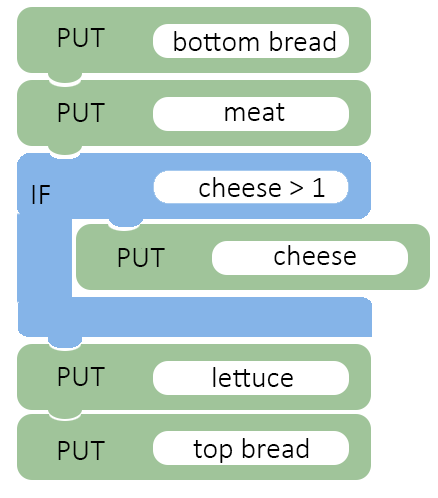
<style>
.page{position:relative;width:438px;height:498px;background:#ffffff}
.page>*{position:absolute;margin:0}
.t1{font:30px "Calibri-Light";color:#000000}
</style>
<div class="page">
<p class="t1" style="left:58px;top:28px;width:47px;height:19px">PUT</p>
<p class="t1" style="left:174px;top:31px;width:162px;height:20px">bottom bread</p>
<p class="t1" style="left:58px;top:103px;width:47px;height:19px">PUT</p>
<p class="t1" style="left:225px;top:103px;width:60px;height:18px">meat</p>
<p class="t1" style="left:32px;top:185px;width:18px;height:19px">IF</p>
<p class="t1" style="left:199px;top:177px;width:126px;height:20px">cheese &gt; 1</p>
<p class="t1" style="left:274px;top:245px;width:82px;height:20px">cheese</p>
<p class="t1" style="left:118px;top:248px;width:47px;height:19px">PUT</p>
<p class="t1" style="left:58px;top:367px;width:47px;height:19px">PUT</p>
<p class="t1" style="left:213px;top:367px;width:80px;height:20px">lettuce</p>
<p class="t1" style="left:193px;top:438px;width:116px;height:25px">top bread</p>
<p class="t1" style="left:58px;top:441px;width:47px;height:19px">PUT</p>
</div>
